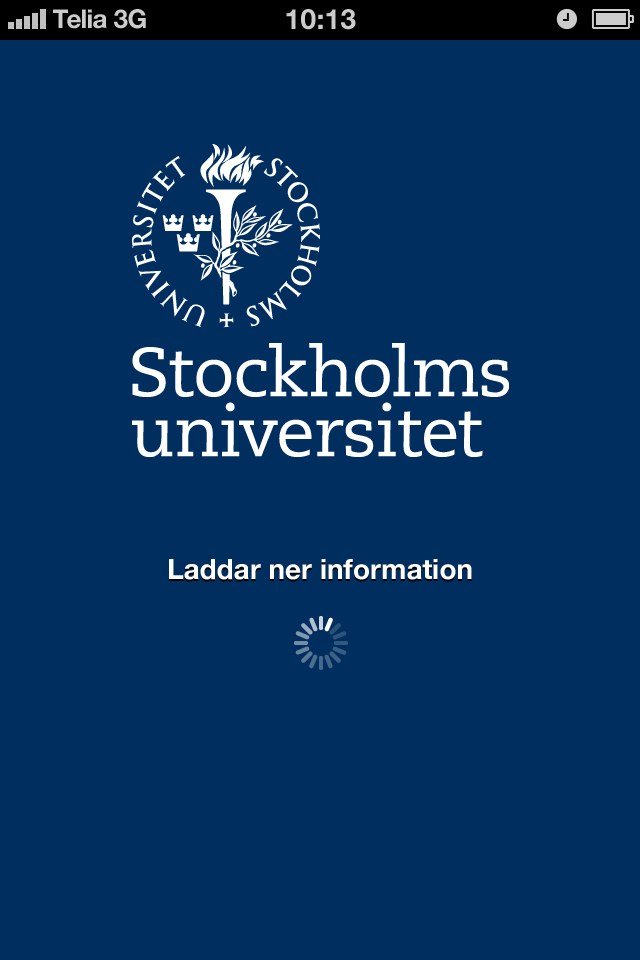
<style>
.page{position:relative;width:640px;height:960px;background:#002e5f}
.page>*{position:absolute;margin:0}
.t1{font:26px "HelveticaNeue-Bold";color:#cccccc}
.t2{font:26px "HelveticaNeue-Bold";color:#cccccc;text-transform:uppercase}
.t3{font:28px "HelveticaNeue-Bold";color:#cccccc;text-transform:uppercase}
.t4{font:28px "HelveticaNeue-Bold";color:#ffffff}
</style>
<div class="page">
<p class="t1" style="left:53px;top:9px;width:54px;height:20px">Telia</p>
<p class="t2" style="left:114px;top:9px;width:32px;height:20px">3G</p>
<p class="t3" style="left:286px;top:9px;width:70px;height:21px">10:13</p>
<p class="t4" style="left:169px;top:559px;width:303px;height:21px">Laddar ner information</p>
</div>
